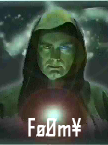
<style>
.page{position:relative;width:108px;height:145px}
.page>*{position:absolute;margin:0}
.t1{font:24px "AgencyFB-Reg";color:#ffffff;font-weight:bold}
</style>
<div class="page">
<p class="t1" style="left:28px;top:118px;width:53px;height:19px">FøØm¥</p>
</div>
